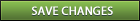
<style>
.page{position:relative;width:140px;height:21px}
.page>*{position:absolute;margin:0}
.t1{font:12px "MyriadPro-Regular";color:#ffffff;font-weight:bold}
</style>
<div class="page">
<p class="t1" style="left:31px;top:6px;width:82px;height:9px">SAVE CHANGES</p>
</div>
